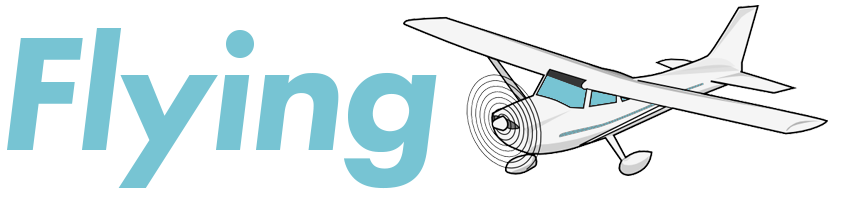
<style>
.page{position:relative;width:850px;height:200px;background:#ffffff}
.page>*{position:absolute;margin:0}
.t1{font:167.2px "FuturaPT-HeavyObl";letter-spacing:-0.025em;color:#77c4d3}
</style>
<div class="page">
<p class="t1" style="left:7px;top:28px;width:430px;height:161px">Flying</p>
</div>
